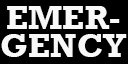
<style>
.page{position:relative;width:128px;height:64px;background:#000000}
.page>*{position:absolute;margin:0}
.t1{font:33.3px/27.7px "Rockwell-Bold";color:#f8f8f8}
</style>
<div class="page">
<p class="t1" style="left:1px;top:6px;width:126px;height:51px;text-align:center">EMER-<br>GENCY</p>
</div>
